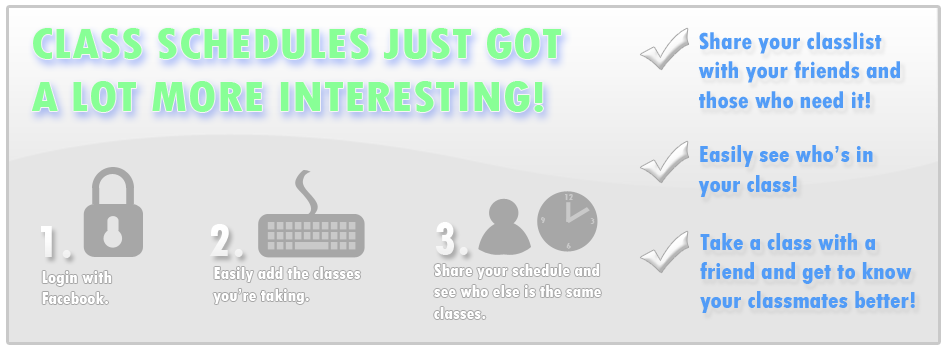
<style>
.page{position:relative;width:950px;height:350px;background:#e5e5e5}
.page>*{position:absolute;margin:0}
.t1{font:43.9px "TwCenMT-CondensedExtraBold";color:#88ff96;scale:1.17 1}
.t2{font:24.6px "TwCenMT-CondensedExtraBold";color:#529cf7}
.t3{font:9px "TwCenMT-CondensedExtraBold";color:#c9c9c9}
.t4{font:48px "TwCenMT-CondensedExtraBold";color:#ffffff}
.t5{font:18px "TwCenMT-CondensedExtraBold";color:#ffffff}
</style>
<div class="page">
<p class="t1" style="left:31px;top:28px;width:530px;height:84px">CLASS SCHEDULES JUST GOT<br>A LOT MORE INTERESTING!</p>
<p class="t2" style="left:698px;top:32px;width:202px;height:77px">Share your classlist<br>with your friends and<br>those who need it!</p>
<p class="t2" style="left:698px;top:145px;width:175px;height:52px">Easily see who’s in<br>your class!</p>
<p class="t3" style="left:565px;top:194px;width:8px;height:6px">12</p>
<p class="t4" style="left:436px;top:222px;width:32px;height:33px">3.</p>
<p class="t3" style="left:541px;top:217px;width:4px;height:6px">9</p>
<p class="t3" style="left:590px;top:218px;width:5px;height:6px">3</p>
<p class="t4" style="left:41px;top:226px;width:30px;height:32px">1.</p>
<p class="t4" style="left:209px;top:224px;width:34px;height:33px">2.</p>
<p class="t2" style="left:700px;top:233px;width:215px;height:80px">Take a class with a<br>friend and get to know<br>your classmates better!</p>
<p class="t3" style="left:566px;top:243px;width:5px;height:6px">6</p>
<p class="t5" style="left:213px;top:267px;width:148px;height:37px">Easily add the classes<br>you’re taking.</p>
<p class="t5" style="left:434px;top:264px;width:167px;height:55px">Share your schedule and<br>see who else is the same<br>classes.</p>
<p class="t5" style="left:42px;top:271px;width:70px;height:33px">Login with <br>Facebook.</p>
</div>
